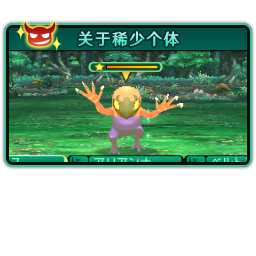
<style>
.page{position:relative;width:256px;height:256px;background:#ffffff}
.page>*{position:absolute;margin:0}
.t1{font:16px "HYWenHei-FEW";letter-spacing:0.105em;scale:0.97 1}
</style>
<div class="page">
<p class="t1" style="left:78px;top:31px;width:101px;height:16px">关于稀少个体</p>
</div>
